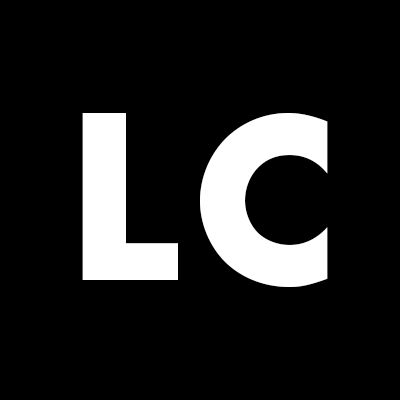
<style>
.page{position:relative;width:400px;height:400px;background:#000000}
.page>*{position:absolute;margin:0}
.t1{font:250px "FuturaPT-Bold";color:#ffffff}
</style>
<div class="page">
<p class="t1" style="left:82px;top:113px;width:96px;height:167px">L</p>
<p class="t1" style="left:200px;top:113px;width:128px;height:174px">C</p>
</div>
